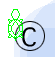
<style>
.page{position:relative;width:55px;height:57px;background:#ffffff}
.page>*{position:absolute;margin:0}
.t1{font:24px "Osaka-UI";color:#000001}
</style>
<div class="page">
<p class="t1" style="left:22px;top:27px;width:14px;height:20px">C</p>
</div>
